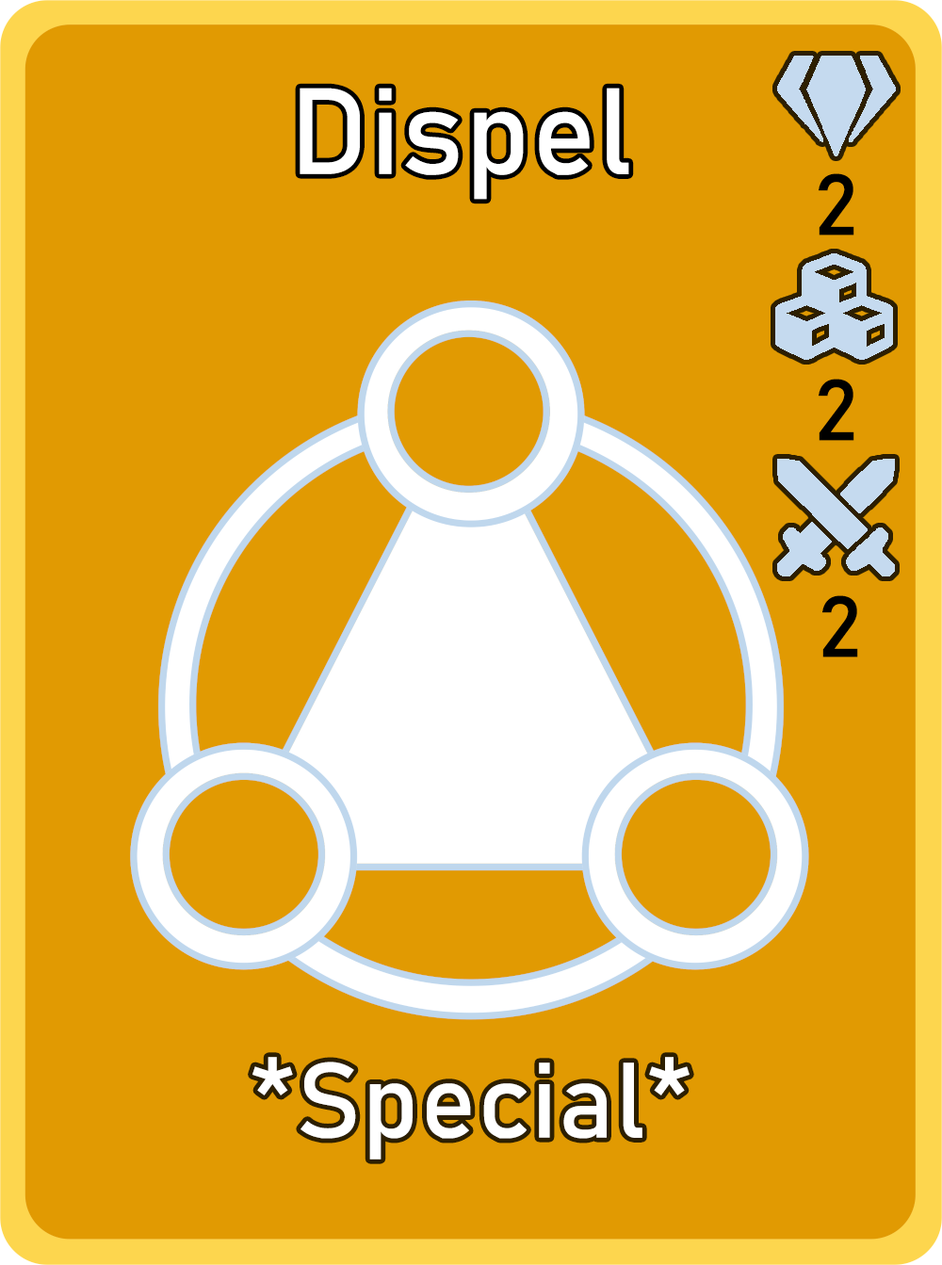
<style>
.page{position:relative;width:942px;height:1265px;background:#e19a02}
.page>*{position:absolute;margin:0}
.t1{font:120.6px "Bahnschrift";letter-spacing:0.01em;color:#ffffff}
.t2{font:85px "Bahnschrift";letter-spacing:0.01em;color:#000000}
.t3{font:105.1px "Bahnschrift";letter-spacing:0.01em;color:#ffffff}
</style>
<div class="page">
<p class="t1" style="left:300px;top:88px;width:329px;height:112px">Dispel</p>
<p class="t2" style="left:819px;top:173px;width:36px;height:63px">2</p>
<p class="t2" style="left:819px;top:379px;width:36px;height:62px">2</p>
<p class="t2" style="left:823px;top:596px;width:35px;height:62px">2</p>
<p class="t3" style="left:253px;top:1057px;width:437px;height:103px">*Special*</p>
</div>
